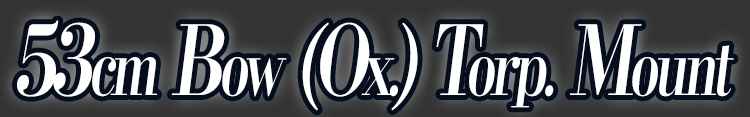
<style>
.page{position:relative;width:750px;height:117px;background:#070d1d}
.page>*{position:absolute;margin:0}
.t1{font:76.8px "KochoStd-Heavy";letter-spacing:-0.08em;color:#ffffff;font-style:italic;scale:0.72 1}
.t2{font:96px "KochoStd-Heavy";letter-spacing:-0.08em;color:#ffffff;font-style:italic;scale:0.72 1}
</style>
<div class="page">
<p class="t1" style="left:17px;top:20px;width:717px;height:91px"><span class="t2">53</span>cm<span class="t2"> B</span>ow<span class="t2"> (O</span>x.<span class="t2">) T</span>orp.<span class="t2"> M</span>ount</p>
</div>
